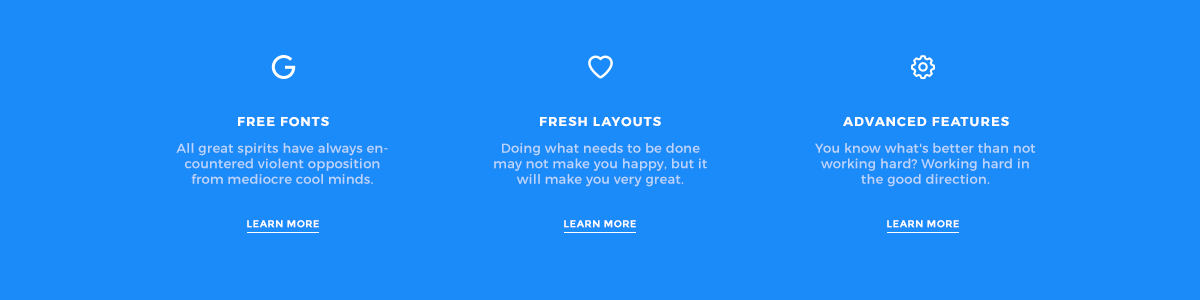
<style>
.page{position:relative;width:1200px;height:300px;background:#1b8bf9}
.page>*{position:absolute;margin:0}
.t1{font:13px "Montserrat-Bold";letter-spacing:0.08em;color:#ffffff;text-transform:uppercase}
.t2{font:13px "Montserrat-Regular";letter-spacing:0.025em;color:#bbd5fd}
.t3{font:10px "Montserrat-Bold";letter-spacing:0.04em;color:#ffffff;text-transform:uppercase}
</style>
<div class="page">
<p class="t1" style="left:238px;top:116px;width:91px;height:11px">free fonts</p>
<p class="t1" style="left:540px;top:116px;width:121px;height:11px">fresh layouts</p>
<p class="t1" style="left:843px;top:116px;width:166px;height:11px">advanced features</p>
<p class="t2" style="left:176px;top:143px;width:212px;height:41px;text-align:center">All great spirits have always encountered violent opposition from mediocre cool minds.</p>
<p class="t2" style="left:494px;top:143px;width:213px;height:44px;text-align:center">Doing what needs to be done may not make you happy, but it will make you very great.</p>
<p class="t2" style="left:815px;top:143px;width:221px;height:44px;text-align:center">You know what's better than not working hard? Working hard in the good direction.</p>
<p class="t3" style="left:247px;top:220px;width:72px;height:8px">Learn more</p>
<p class="t3" style="left:564px;top:220px;width:72px;height:8px">Learn more</p>
<p class="t3" style="left:887px;top:220px;width:72px;height:8px">Learn more</p>
</div>
